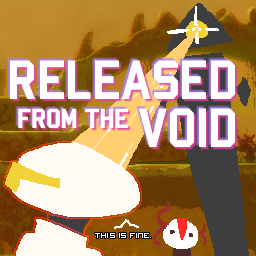
<style>
.page{position:relative;width:256px;height:256px}
.page>*{position:absolute;margin:0}
.t1{font:60px/48px "Bombardier";color:#ffffff}
.t2{font:30px "Bombardier";color:#ffffff}
.t3{font:8px "RiskofRainSquare";color:#ffffff}
.t4{font:9px "RiskofRainSquare";color:#ffffff}
</style>
<div class="page">
<p class="t1" style="left:10px;top:60px;width:225px;height:87px;text-align:right">RELEASED<br>VOID</p>
<p class="t2" style="left:18px;top:108px;width:110px;height:20px">FROM THE</p>
<p class="t3" style="left:95px;top:233px;width:56px;height:5px">This is fine<span class="t4">.</span></p>
</div>
